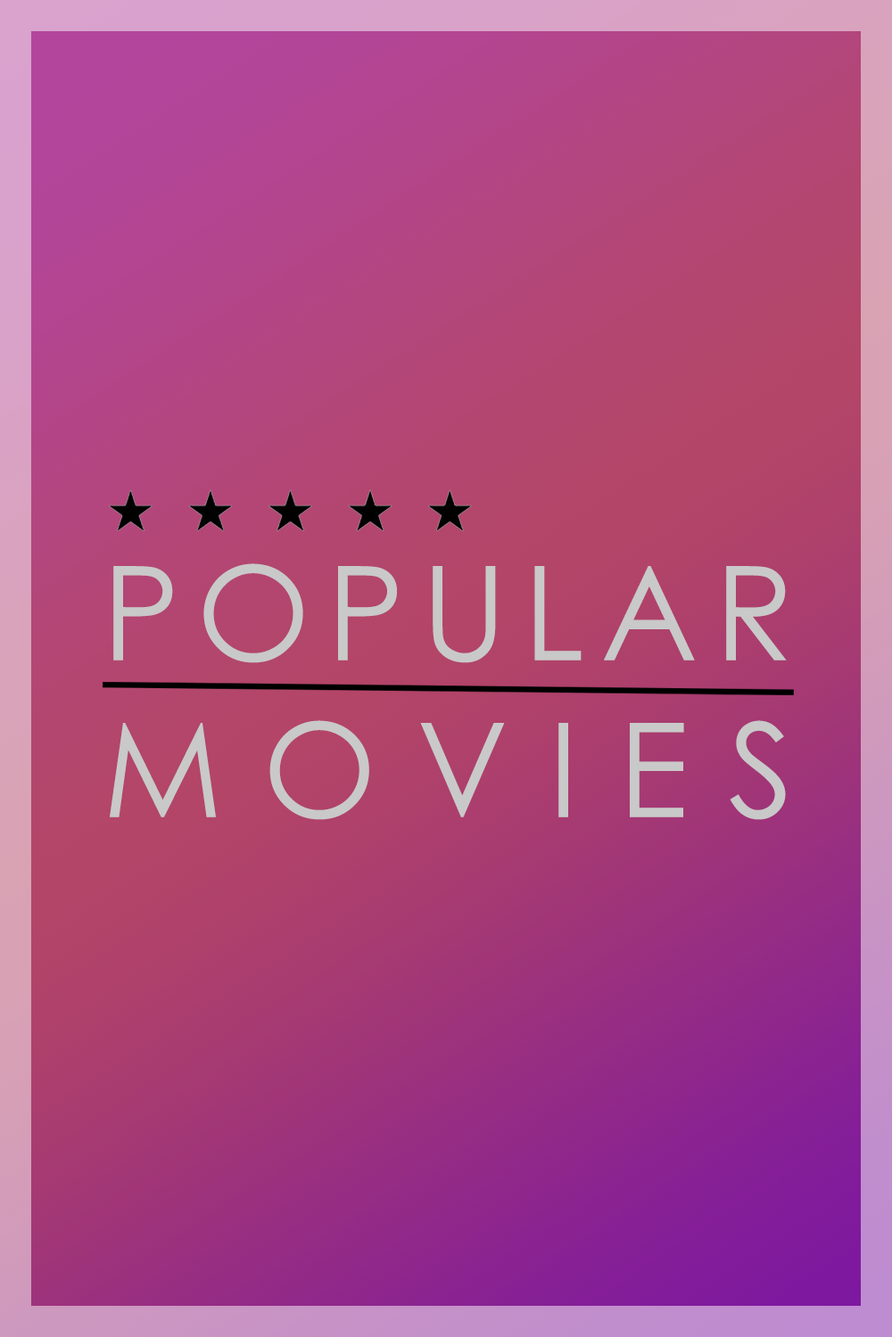
<style>
.page{position:relative;width:892px;height:1337px}
.page>*{position:absolute;margin:0}
.t1{font:130.8px "CenturyGothic";color:#c9c9c9}
</style>
<div class="page">
<p class="t1" style="left:110px;top:563px;width:676px;height:257px;text-align:justify">POPULAR<br>MOVIES</p>
</div>
